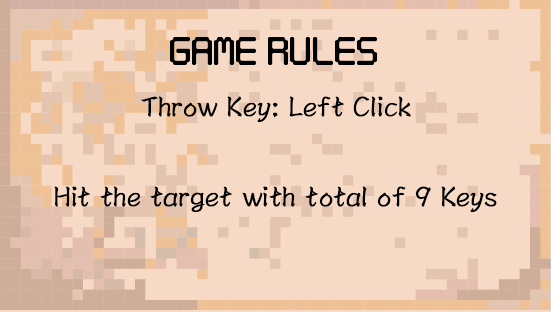
<style>
.page{position:relative;width:551px;height:312px;background:#f6dac5}
.page>*{position:absolute;margin:0}
.t1{font:40px "Digitaltech";letter-spacing:0.005em;color:#000000}
.t2{font:30px/30px "CXingHKS-Medium";letter-spacing:0.005em;color:#000000;font-weight:bold}
</style>
<div class="page">
<p class="t1" style="left:170px;top:37px;width:207px;height:28px">Game Rules</p>
<p class="t2" style="left:54px;top:96px;width:443px;height:117px;text-align:center">Throw Key: Left Click<br><br><br>Hit the target with total of 9 Keys</p>
</div>
